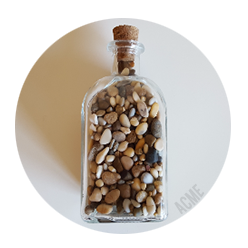
<style>
.page{position:relative;width:248px;height:248px;background:#ffffff}
.page>*{position:absolute;margin:0}
.t1{font:13.9px "Bebas";color:#c2c7ca}
</style>
<div class="page">
<p class="t1" style="left:174px;top:183px;width:31px;height:32px;rotate:-42deg">ACME</p>
</div>
